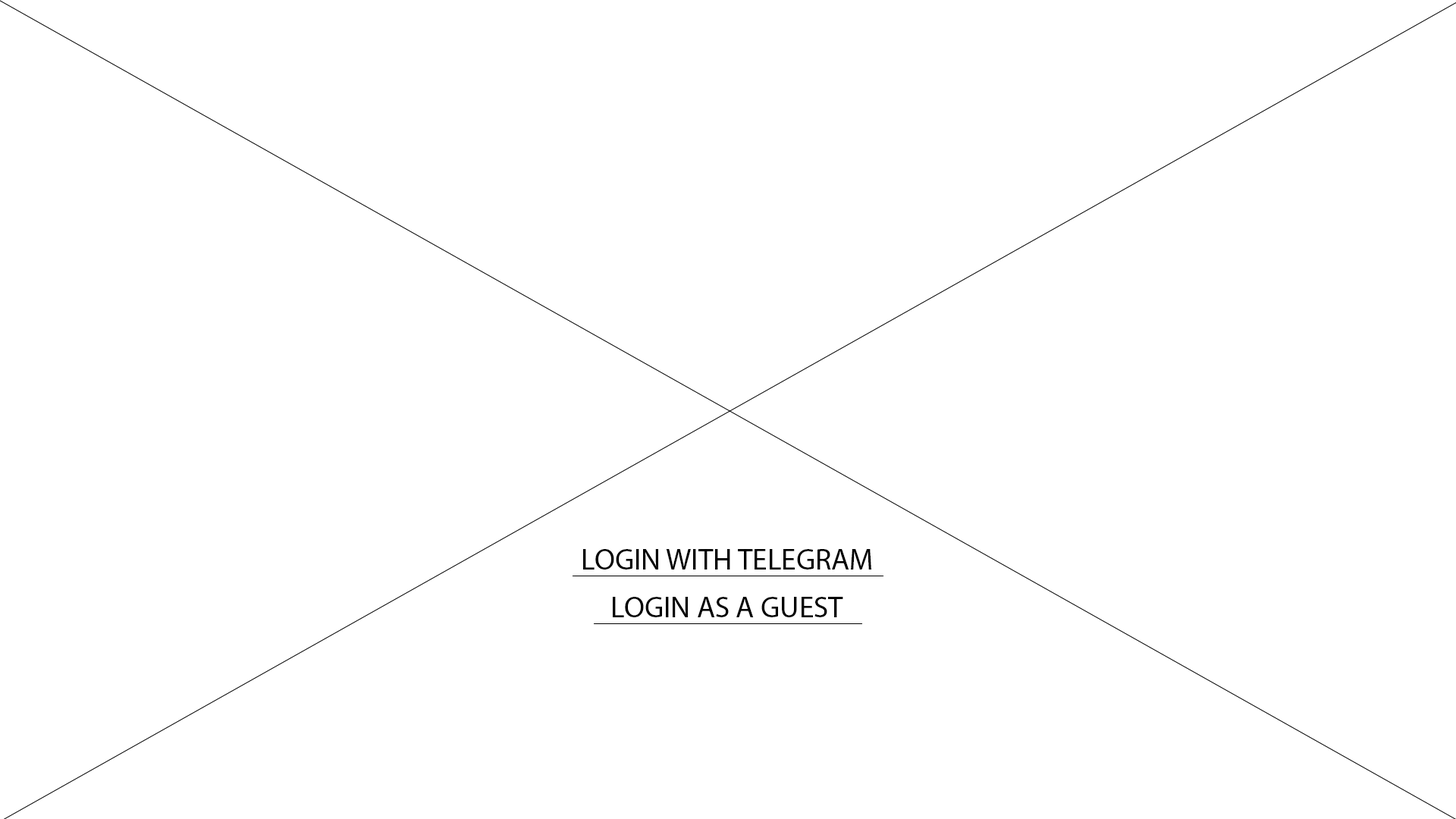
<style>
.page{position:relative;width:1456px;height:819px;background:#ffffff}
.page>*{position:absolute;margin:0}
.t1{font:29.8px "MyriadPro-Regular";color:#000000}
</style>
<div class="page">
<p class="t1" style="left:583px;top:549px;width:288px;height:21px">LOGIN WITH TELEGRAM</p>
<p class="t1" style="left:613px;top:597px;width:230px;height:20px">LOGIN AS A GUEST</p>
</div>
